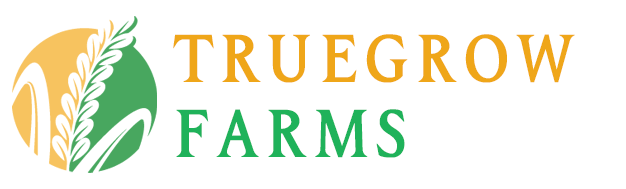
<style>
.page{position:relative;width:626px;height:189px;background:#ffffff}
.page>*{position:absolute;margin:0}
.t1{font:62.5px "Exquisite";letter-spacing:0.15em;color:#efa619;text-transform:uppercase}
.t2{font:62.5px "Exquisite";letter-spacing:0.15em;color:#1fb25a;text-transform:uppercase}
</style>
<div class="page">
<p class="t1" style="left:173px;top:34px;width:402px;height:124px">TrueGROW<br><span class="t2">FARMS</span></p>
</div>
